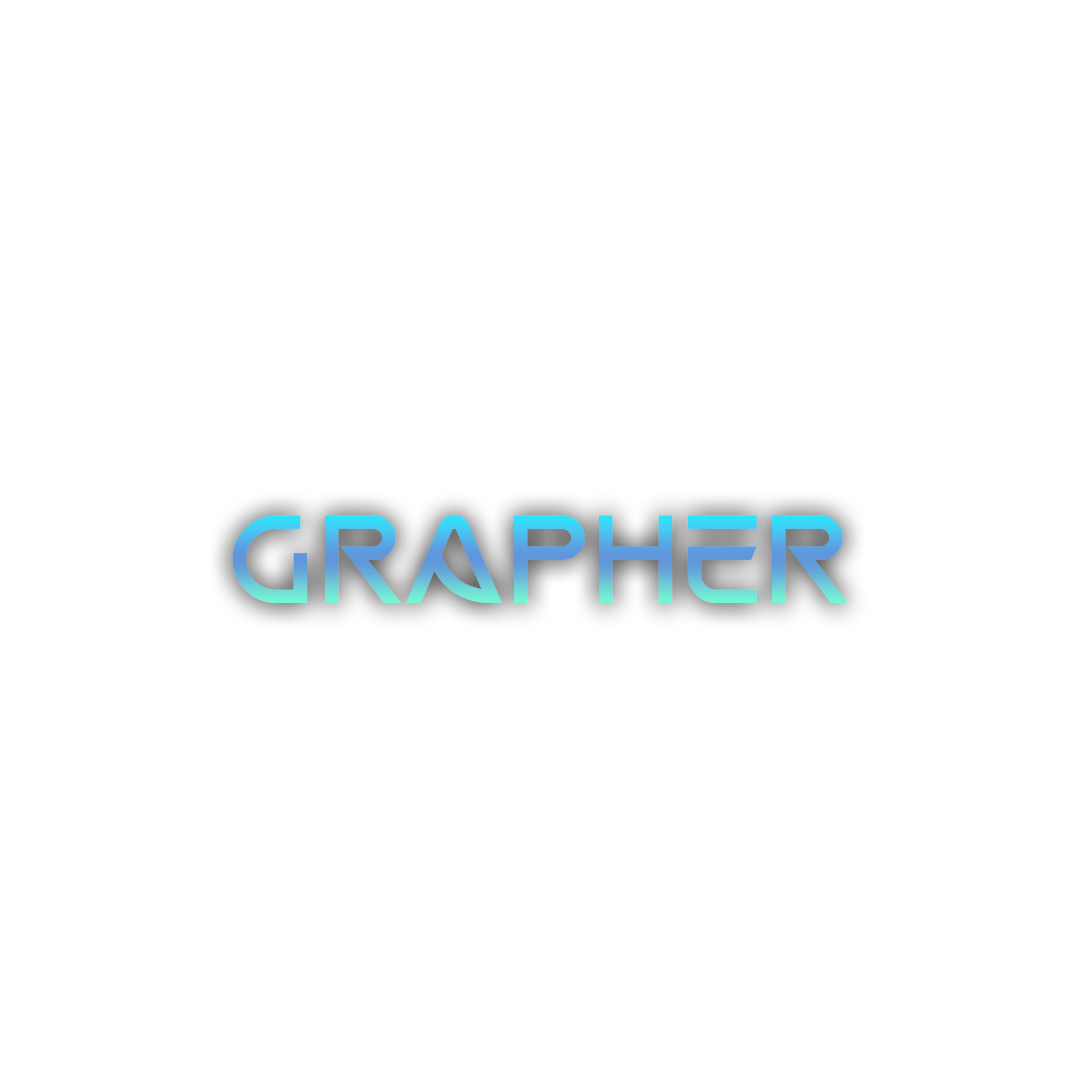
<style>
.page{position:relative;width:1080px;height:1080px;background:#ffffff}
.page>*{position:absolute;margin:0}
.t1{font:125px "BARO"}
</style>
<div class="page">
<p class="t1" style="left:232px;top:515px;width:616px;height:88px">Grapher</p>
</div>
